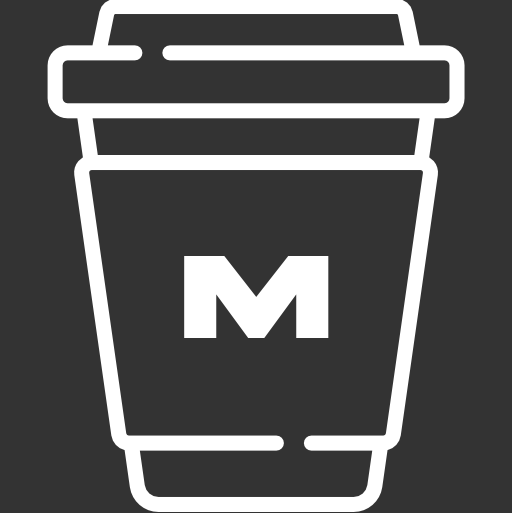
<style>
.page{position:relative;width:512px;height:513px;background:#333333}
.page>*{position:absolute;margin:0}
.t1{font:125px "AkiraExpanded-SuperBold";color:#ffffff}
</style>
<div class="page">
<p class="t1" style="left:184px;top:256px;width:145px;height:82px">M</p>
</div>
